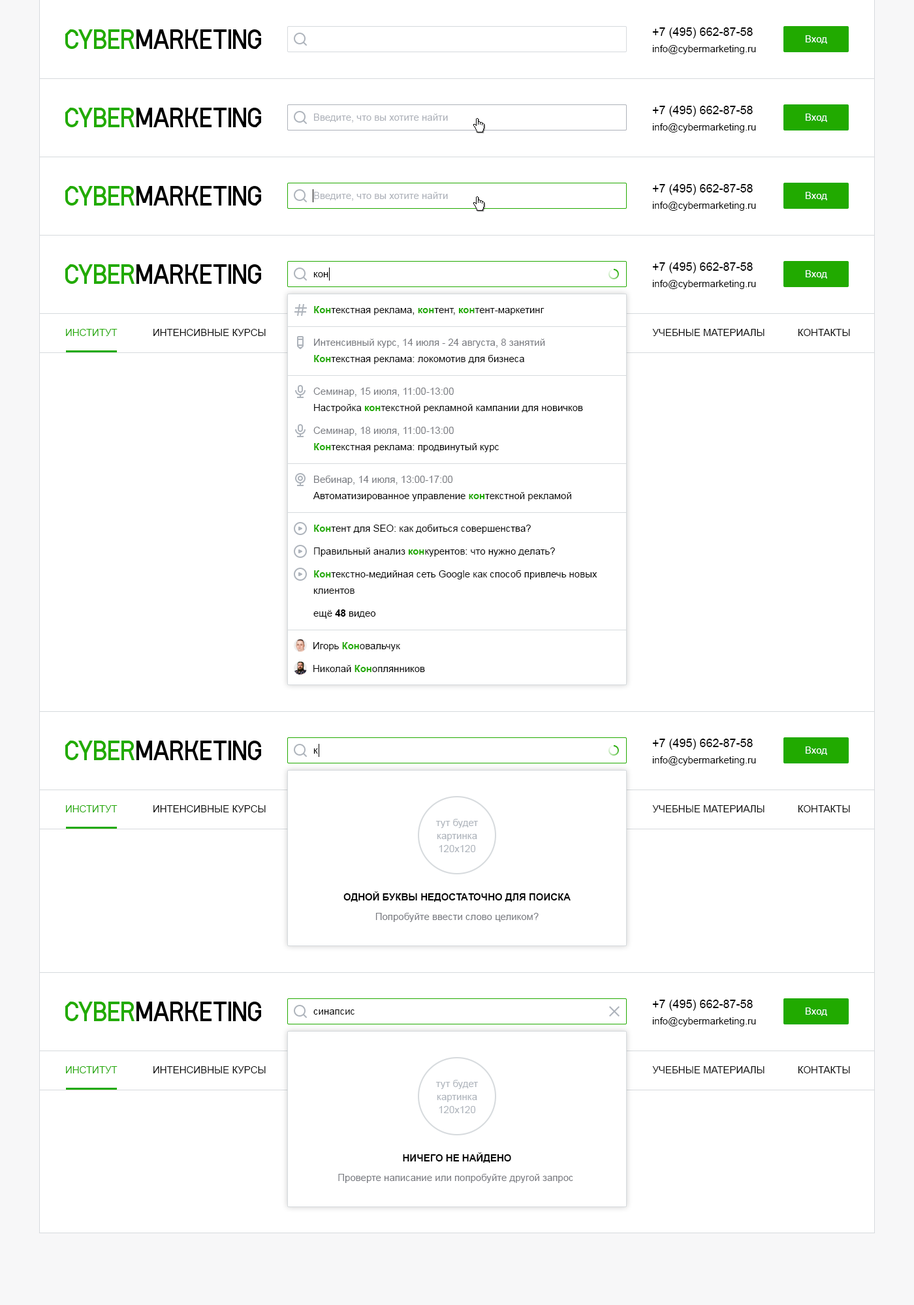
<style>
.page{position:relative;width:914px;height:1305px;background:#ffffff}
.page>*{position:absolute;margin:0}
.t1{font:11.7px "ArialMT";color:#000000}
.t2{font:9.8px "ArialMT";color:#ffffff}
.t3{font:9.8px "ArialMT";color:#000000}
.t4{font:9.8px "ArialMT";color:#adb1b9}
.t5{font:9.8px "Arial-BoldMT";color:#21aa00}
.t6{font:9.8px "ArialMT";text-transform:uppercase}
.t7{font:9.8px "ArialMT";color:#787a80}
.t8{font:9.8px/16.3px "ArialMT";color:#000000}
.t9{font:9.8px/16.3px "Arial-BoldMT";color:#21aa00}
.t10{font:9.8px "Arial-BoldMT";color:#000000}
.t11{font:9.8px/13.1px "ArialMT";color:#adb3bb}
.t12{font:9.8px "Arial-BoldMT";color:#000000;text-transform:uppercase}
</style>
<div class="page">
<p class="t1" style="left:652px;top:27px;width:100px;height:12px">+7 (495) 662-87-58</p>
<p class="t2" style="left:805px;top:35px;width:22px;height:9px">Вход</p>
<p class="t3" style="left:652px;top:45px;width:104px;height:9px">info@cybermarketing.ru</p>
<p class="t4" style="left:314px;top:114px;width:134px;height:9px">Введите, что вы хотите найти</p>
<p class="t1" style="left:652px;top:106px;width:100px;height:11px">+7 (495) 662-87-58</p>
<p class="t2" style="left:805px;top:114px;width:22px;height:8px">Вход</p>
<p class="t3" style="left:652px;top:123px;width:104px;height:9px">info@cybermarketing.ru</p>
<p class="t1" style="left:652px;top:184px;width:100px;height:11px">+7 (495) 662-87-58</p>
<p class="t4" style="left:314px;top:192px;width:134px;height:9px">Введите, что вы хотите найти</p>
<p class="t2" style="left:805px;top:192px;width:22px;height:8px">Вход</p>
<p class="t3" style="left:652px;top:202px;width:104px;height:9px">info@cybermarketing.ru</p>
<p class="t1" style="left:652px;top:262px;width:100px;height:11px">+7 (495) 662-87-58</p>
<p class="t3" style="left:313px;top:272px;width:15px;height:5px">кон</p>
<p class="t3" style="left:652px;top:280px;width:104px;height:9px">info@cybermarketing.ru</p>
<p class="t2" style="left:805px;top:270px;width:22px;height:9px">Вход</p>
<p class="t3" style="left:314px;top:306px;width:230px;height:9px"><span class="t5">Кон</span>текстная реклама, <span class="t5">кон</span>тент, <span class="t5">кон</span>тент-маркетинг</p>
<p class="t6" style="left:66px;top:329px;width:784px;height:9px">Институт             Интенсивные курсы            конференции            Семинары            вебинары            Видео            Учебные материалы            Контакты</p>
<p class="t7" style="left:314px;top:339px;width:231px;height:9px">Интенсивный курс, 14 июля - 24 августа, 8 занятий</p>
<p class="t3" style="left:314px;top:355px;width:210px;height:9px"><span class="t5">Кон</span>текстная реклама: локомотив для бизнеса</p>
<p class="t7" style="left:313px;top:388px;width:141px;height:9px">Семинар, 15 июля, 11:00-13:00</p>
<p class="t3" style="left:314px;top:404px;width:269px;height:9px">Настройка <span class="t5">кон</span>текстной рекламной кампании для новичков</p>
<p class="t7" style="left:313px;top:427px;width:141px;height:9px">Семинар, 18 июля, 11:00-13:00</p>
<p class="t3" style="left:314px;top:443px;width:185px;height:9px"><span class="t5">Кон</span>текстная реклама: продвинутый курс</p>
<p class="t7" style="left:314px;top:476px;width:139px;height:9px">Вебинар, 14 июля, 13:00-17:00</p>
<p class="t3" style="left:313px;top:492px;width:258px;height:9px">Автоматизированное управление <span class="t5">кон</span>текстной рекламой</p>
<p class="t3" style="left:314px;top:525px;width:217px;height:9px"><span class="t5">Кон</span>тент для SEO: как добиться совершенства?</p>
<p class="t3" style="left:314px;top:548px;width:241px;height:9px">Правильный анализ <span class="t5">кон</span>курентов: что нужно делать?</p>
<p class="t8" style="left:313px;top:570px;width:284px;height:24px"><span class="t9">Кон</span>текстно-медийная сеть Google как способ привлечь новых <br>клиентов</p>
<p class="t3" style="left:313px;top:610px;width:63px;height:9px">ещё <span class="t10">48</span> видео</p>
<p class="t3" style="left:313px;top:642px;width:87px;height:9px">Игорь <span class="t5">Кон</span>овальчук</p>
<p class="t3" style="left:313px;top:665px;width:112px;height:7px">Николай <span class="t5">Кон</span>оплянников</p>
<p class="t3" style="left:313px;top:749px;width:5px;height:5px">к</p>
<p class="t1" style="left:652px;top:739px;width:100px;height:11px">+7 (495) 662-87-58</p>
<p class="t2" style="left:805px;top:747px;width:22px;height:8px">Вход</p>
<p class="t3" style="left:652px;top:756px;width:104px;height:9px">info@cybermarketing.ru</p>
<p class="t6" style="left:66px;top:805px;width:784px;height:9px">Институт             Интенсивные курсы            конференции            Семинары            вебинары            Видео            Учебные материалы            Контакты</p>
<p class="t11" style="left:435px;top:819px;width:43px;height:33px;text-align:center">тут будет<br>картинка<br>120х120</p>
<p class="t12" style="left:343px;top:891px;width:227px;height:11px">одной буквы недостаточно для поиска</p>
<p class="t7" style="left:375px;top:913px;width:163px;height:9px">Попробуйте ввести слово целиком?</p>
<p class="t1" style="left:652px;top:1000px;width:100px;height:11px">+7 (495) 662-87-58</p>
<p class="t3" style="left:313px;top:1010px;width:41px;height:5px">синапсис</p>
<p class="t2" style="left:805px;top:1008px;width:22px;height:8px">Вход</p>
<p class="t3" style="left:652px;top:1017px;width:104px;height:10px">info@cybermarketing.ru</p>
<p class="t6" style="left:66px;top:1066px;width:784px;height:9px">Институт             Интенсивные курсы            конференции            Семинары            вебинары            Видео            Учебные материалы            Контакты</p>
<p class="t11" style="left:435px;top:1080px;width:43px;height:33px;text-align:center">тут будет<br>картинка<br>120х120</p>
<p class="t12" style="left:403px;top:1152px;width:108px;height:11px">Ничего не найдено</p>
<p class="t7" style="left:338px;top:1174px;width:235px;height:9px">Проверте написание или попробуйте другой запрос</p>
</div>
